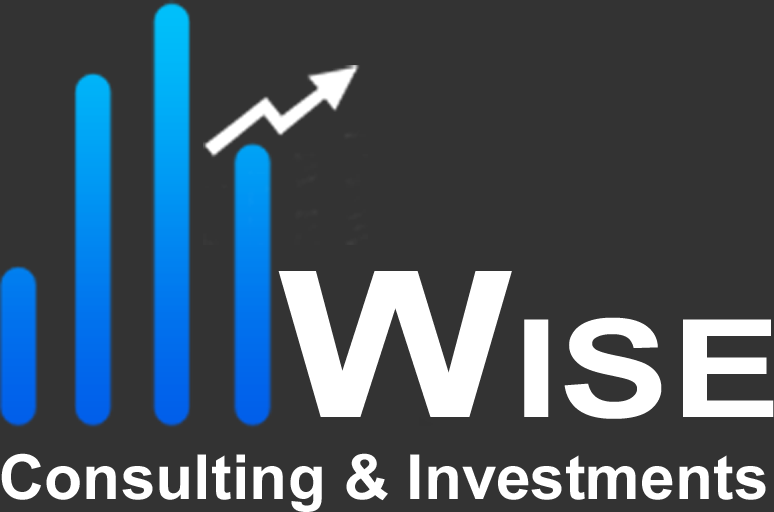
<style>
.page{position:relative;width:774px;height:512px;background:#333333}
.page>*{position:absolute;margin:0}
.t1{font:136px "Arial-BoldMT";color:#ffffff;scale:1.22 1}
.t2{font:204px "Arial-BoldMT";color:#ffffff;scale:1.22 1}
.t3{font:62.3px "Arial-BoldMT";color:#ffffff}
</style>
<div class="page">
<p class="t1" style="left:278px;top:271px;width:496px;height:148px"><span class="t2">W</span>ISE</p>
<p class="t3" style="left:1px;top:453px;width:765px;height:59px">Consulting &amp; Investments</p>
</div>
